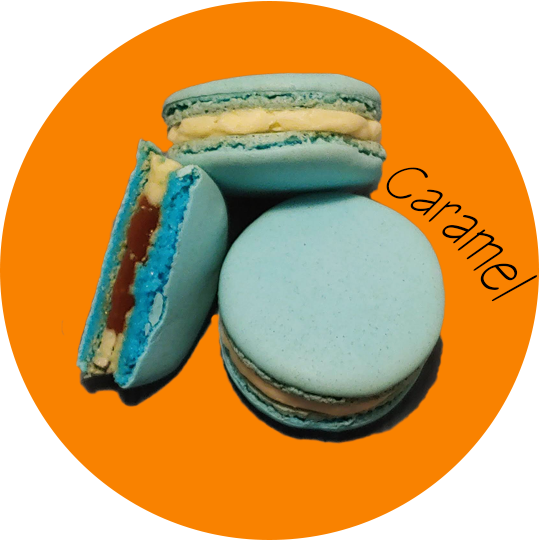
<style>
.page{position:relative;width:540px;height:540px;background:#f98200}
.page>*{position:absolute;margin:0}
.t1{font:45.2px "StylusBT";color:#000000}
</style>
<div class="page">
<p class="t1" style="left:386px;top:167px;width:152px;height:135px;rotate:58deg">Caramel</p>
</div>
